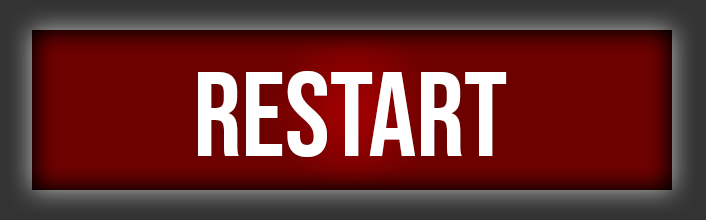
<style>
.page{position:relative;width:706px;height:220px;background:#6d0100}
.page>*{position:absolute;margin:0}
.t1{font:120px "BebasNeue-Regular";color:#ffffff}
</style>
<div class="page">
<p class="t1" style="left:198px;top:71px;width:309px;height:86px">RESTART</p>
</div>
